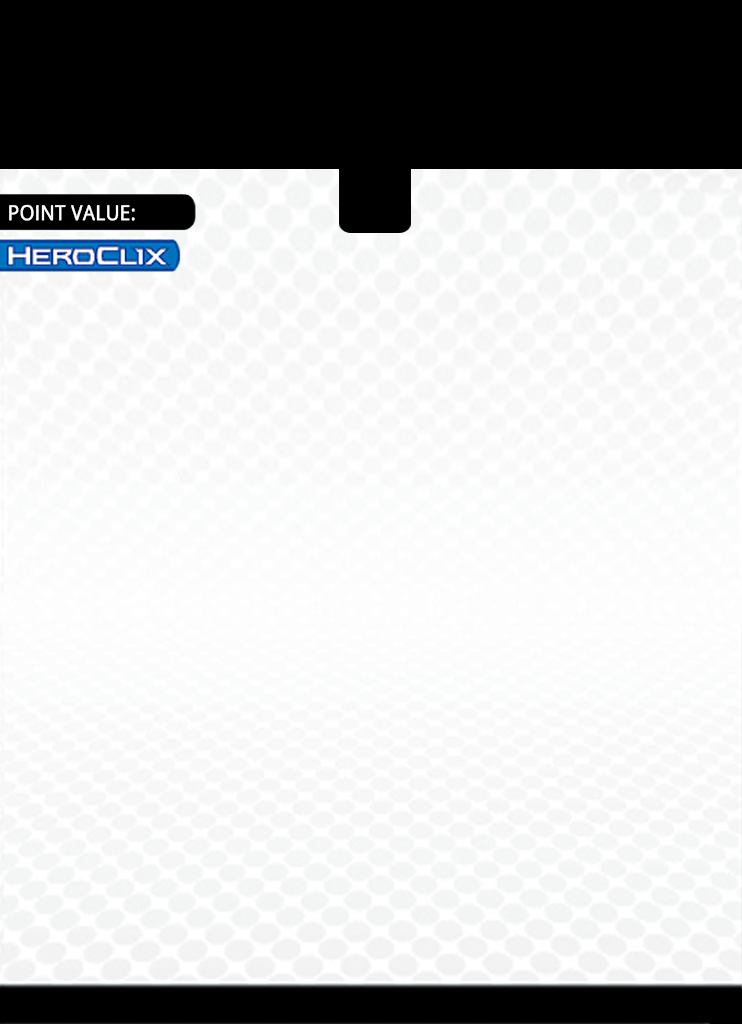
<style>
.page{position:relative;width:742px;height:1024px;background:#000000}
.page>*{position:absolute;margin:0}
.t1{font:20.8px "OpenSans";color:#ffffff;text-transform:uppercase;font-weight:bold;scale:0.9 1}
</style>
<div class="page">
<p class="t1" style="left:9px;top:204px;width:126px;height:17px">point value:</p>
</div>
